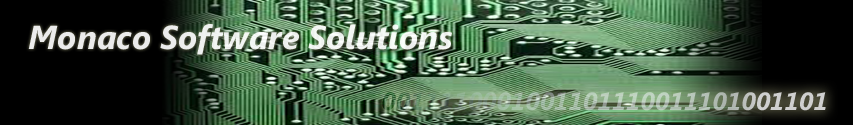
<style>
.page{position:relative;width:853px;height:125px;background:#000000}
.page>*{position:absolute;margin:0}
.t1{font:33.3px "SegoeUI-BoldItalic";color:#ffffff}
.t2{font:25px "SegoeUI-BoldItalic"}
</style>
<div class="page">
<p class="t1" style="left:28px;top:24px;width:424px;height:31px;opacity:0.92">Monaco Software Solutions</p>
<p class="t2" style="left:382px;top:92px;width:444px;height:19px">0011110001001101110011101001101</p>
</div>
